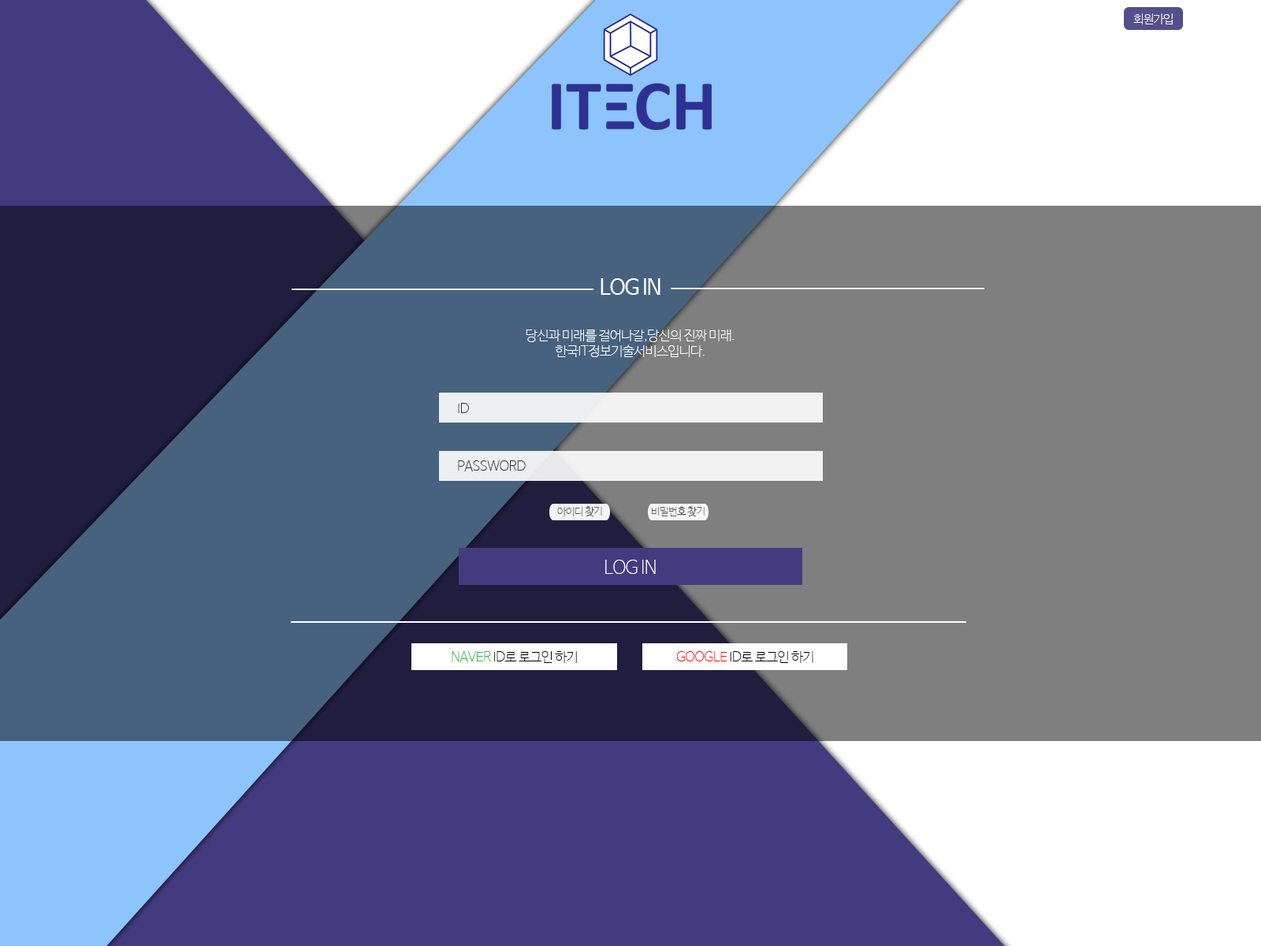
<style>
.page{position:relative;width:1261px;height:946px;background:#7f7f7f}
.page>*{position:absolute;margin:0}
.t1{font:11.8px "NanumBarunGothicUltraLight";letter-spacing:-0.045em;color:#ffffff}
.t2{font:21.3px "NanumBarunGothic";letter-spacing:-0.045em;color:#ffffff}
.t3{font:13.4px/15.8px "NanumBarunGothicUltraLight";letter-spacing:-0.045em;color:#ffffff}
.t4{font:13.4px "NanumBarunGothicUltraLight";letter-spacing:-0.045em;color:#303031}
.t5{font:10.2px "NanumBarunGothicUltraLight";letter-spacing:-0.045em;color:#545354}
.t6{font:10.2px "NanumBarunGothicUltraLight";letter-spacing:-0.045em;color:#555555}
.t7{font:18.1px "NanumBarunGothicUltraLight";letter-spacing:-0.045em;color:#ffffff}
.t8{font:13.4px "NanumBarunGothicUltraLight";letter-spacing:-0.045em;color:#000000}
.t9{font:13.4px "NanumBarunGothicUltraLight";letter-spacing:-0.045em;color:#1ac145}
.t10{font:13.4px "NanumBarunGothicUltraLight";letter-spacing:-0.045em;color:#ff0000}
</style>
<div class="page">
<p class="t1" style="left:1133px;top:13px;width:40px;height:11px">회원가입</p>
<p class="t2" style="left:601px;top:278px;width:59px;height:17px">LOG IN</p>
<p class="t3" style="left:526px;top:329px;width:208px;height:28px;text-align:center">당신과 미래를 걸어나갈,당신의 진짜 미래.<br>한국IT정보기술서비스입니다.</p>
<p class="t4" style="left:458px;top:403px;width:11px;height:10px">ID</p>
<p class="t4" style="left:458px;top:460px;width:68px;height:11px">PASSWORD</p>
<p class="t5" style="left:557px;top:506px;width:45px;height:11px">아이디 찾기</p>
<p class="t6" style="left:651px;top:506px;width:54px;height:11px">비밀번호 찾기</p>
<p class="t7" style="left:605px;top:560px;width:51px;height:14px">LOG IN</p>
<p class="t8" style="left:452px;top:651px;width:125px;height:12px"><span class="t9">NAVER</span> ID로 로그인 하기</p>
<p class="t8" style="left:676px;top:651px;width:137px;height:12px"><span class="t10">GOOGLE </span>ID로 로그인 하기</p>
</div>
